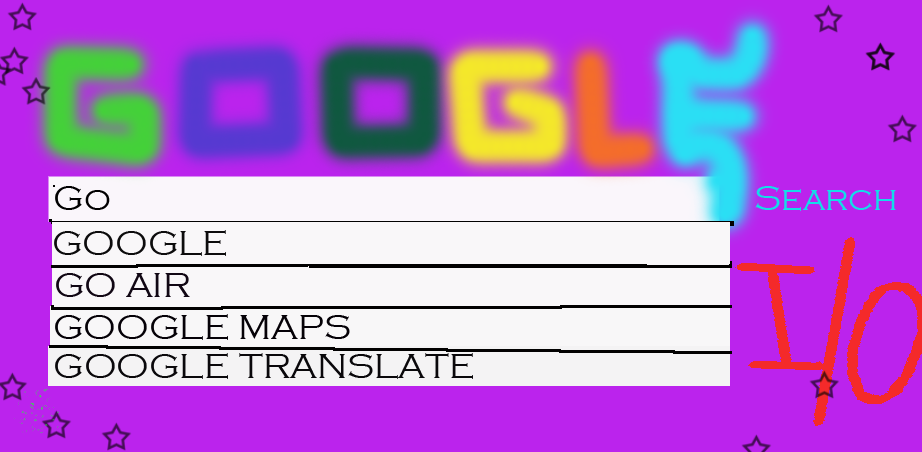
<style>
.page{position:relative;width:922px;height:452px;background:#bb23ed}
.page>*{position:absolute;margin:0}
.t1{font:36px "CopperplateGothic-Light";color:#010001}
.t2{font:36px "CopperplateGothic-Light";color:#14dce8}
.t3{font:36px "CopperplateGothic-Light";color:#0d0c0d}
.t4{font:36px "CopperplateGothic-Light";color:#110714}
.t5{font:36px "CopperplateGothic-Light";color:#050107}
</style>
<div class="page">
<p class="t1" style="left:55px;top:186px;width:55px;height:24px">Go</p>
<p class="t2" style="left:755px;top:186px;width:141px;height:25px">Search</p>
<p class="t3" style="left:54px;top:230px;width:172px;height:26px">GOOGLE</p>
<p class="t4" style="left:56px;top:273px;width:134px;height:24px">GO AIR</p>
<p class="t5" style="left:55px;top:314px;width:295px;height:26px">GOOGLE MAPS</p>
</div>
